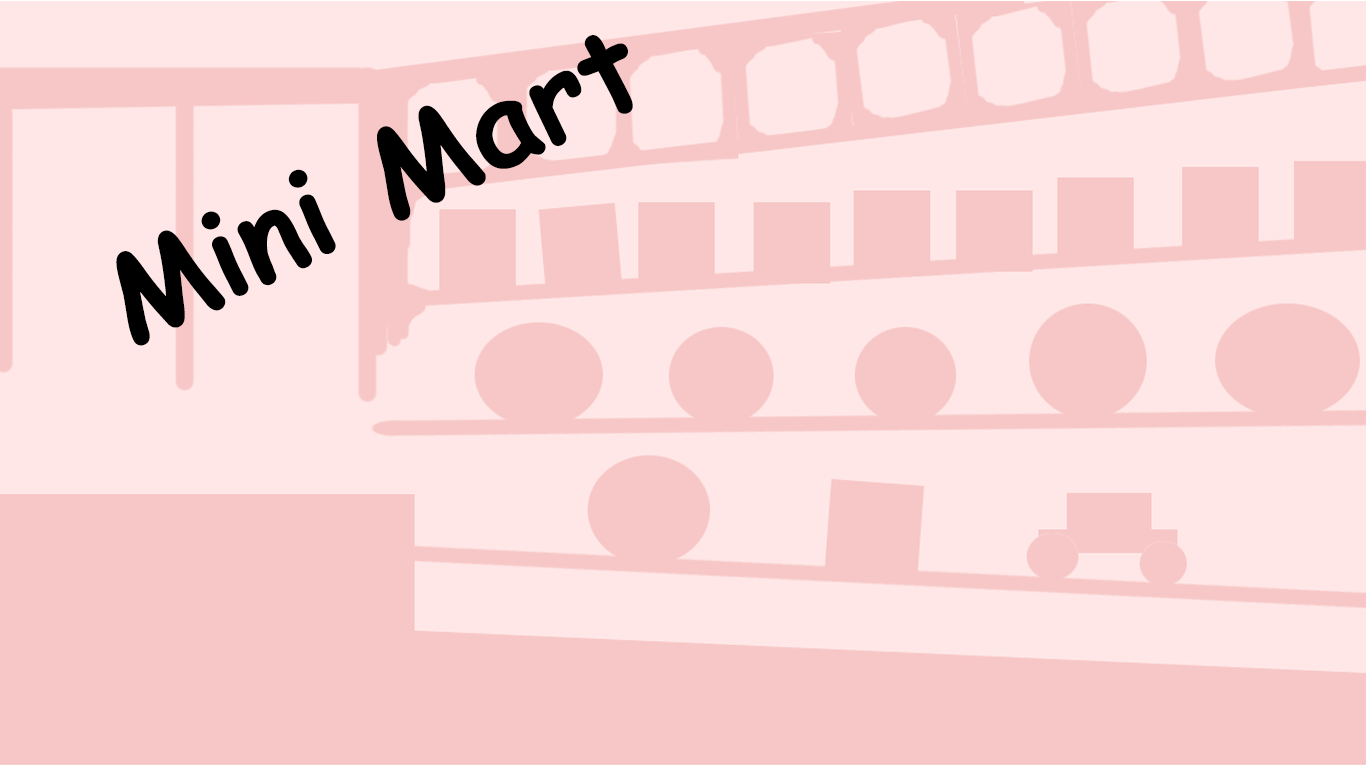
<style>
.page{position:relative;width:1366px;height:768px;background:#ffe7e7}
.page>*{position:absolute;margin:0}
.t1{font:120.4px "ComicSansMS-Bold";color:#000000}
</style>
<div class="page">
<p class="t1" style="left:116px;top:35px;width:517px;height:311px;rotate:-26deg">Mini Mart</p>
</div>
